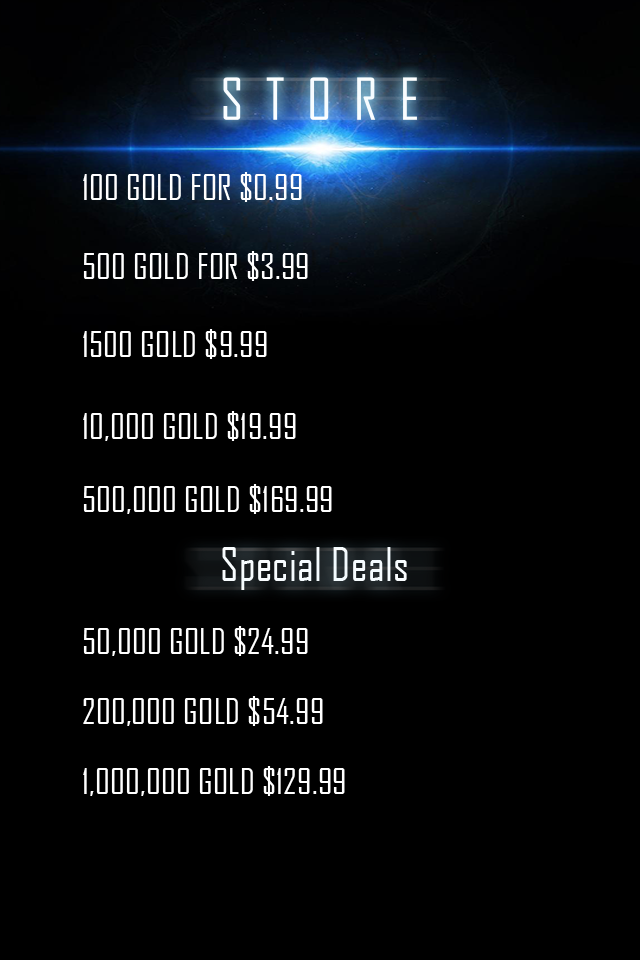
<style>
.page{position:relative;width:640px;height:960px;background:#000000}
.page>*{position:absolute;margin:0}
.t1{font:33.8px "AgencyFB-Reg";letter-spacing:0.01em;color:#ffffff}
.t2{font:43.8px "AgencyFB-Reg";letter-spacing:0.01em;color:#ffffff}
</style>
<div class="page">
<p class="t1" style="left:83px;top:172px;width:219px;height:30px">100 GOLD FOR $0.99</p>
<p class="t1" style="left:83px;top:251px;width:225px;height:30px">500 GOLD FOR $3.99</p>
<p class="t1" style="left:83px;top:329px;width:184px;height:30px">1500 GOLD $9.99</p>
<p class="t1" style="left:83px;top:411px;width:213px;height:30px">10,000 GOLD $19.99</p>
<p class="t1" style="left:83px;top:484px;width:249px;height:30px">500,000 GOLD $169.99</p>
<p class="t2" style="left:222px;top:547px;width:185px;height:43px">Special Deals</p>
<p class="t1" style="left:83px;top:626px;width:225px;height:30px">50,000 GOLD $24.99</p>
<p class="t1" style="left:83px;top:696px;width:240px;height:30px">200,000 GOLD $54.99</p>
<p class="t1" style="left:83px;top:766px;width:262px;height:30px">1,000,000 GOLD $129.99</p>
</div>
